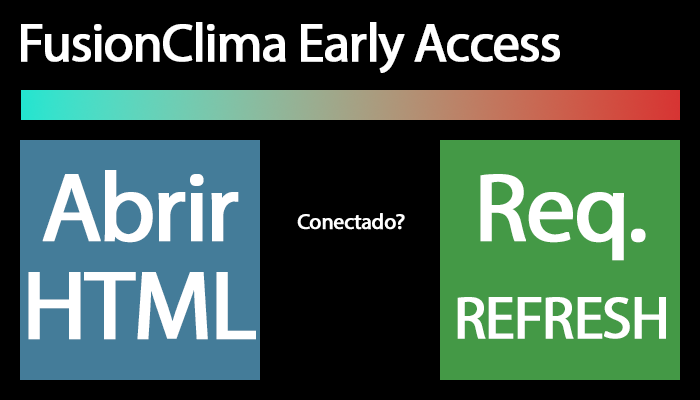
<style>
.page{position:relative;width:700px;height:400px;background:#000000}
.page>*{position:absolute;margin:0}
.t1{font:54.3px "MyriadPro-Regular";letter-spacing:-0.04em;color:#ffffff;font-weight:bold}
.t2{font:98px/98px "MyriadPro-Regular";letter-spacing:-0.04em;color:#ffffff;font-weight:bold}
.t3{font:60px/98px "MyriadPro-Regular";letter-spacing:-0.04em;color:#ffffff;font-weight:bold}
.t4{font:22.2px "MyriadPro-Regular";letter-spacing:-0.04em;color:#ffffff;font-weight:bold}
</style>
<div class="page">
<p class="t1" style="left:21px;top:22px;width:539px;height:51px">FusionClima Early Access</p>
<p class="t2" style="left:28px;top:170px;width:228px;height:170px;text-align:center">Abrir<br>HTML</p>
<p class="t3" style="left:457px;top:174px;width:209px;height:165px;text-align:center"><span class="t2">Req.<br></span>REFRESH</p>
<p class="t4" style="left:297px;top:213px;width:108px;height:17px">Conectado?</p>
</div>
